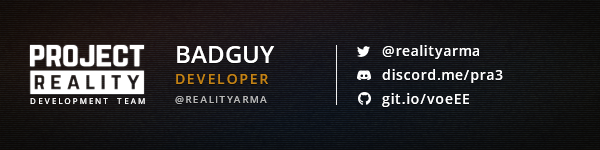
<style>
.page{position:relative;width:600px;height:150px}
.page>*{position:absolute;margin:0}
.t1{font:24px "OpenSans-Semibold";color:#ffffff;text-transform:uppercase}
.t2{font:14px/24px "OpenSans-Semibold";letter-spacing:0.04em;color:#ffffff}
.t3{font:14px "OpenSans-Semibold";letter-spacing:0.12em;color:#c48214;text-transform:uppercase}
.t4{font:8px "OpenSans-Semibold";letter-spacing:0.26em;color:#ffffff;text-transform:uppercase}
.t5{font:10px "OpenSans-Semibold";letter-spacing:0.12em;color:#b7b7b7;text-transform:uppercase}
</style>
<div class="page">
<p class="t1" style="left:177px;top:46px;width:98px;height:17px">Badguy</p>
<p class="t2" style="left:382px;top:45px;width:121px;height:62px">@realityarma<br>discord.me/pra3<br>git.io/voeEE</p>
<p class="t3" style="left:176px;top:74px;width:92px;height:10px">developer</p>
<p class="t4" style="left:30px;top:98px;width:115px;height:6px">development team</p>
<p class="t5" style="left:175px;top:96px;width:92px;height:8px">@realityarma</p>
</div>
